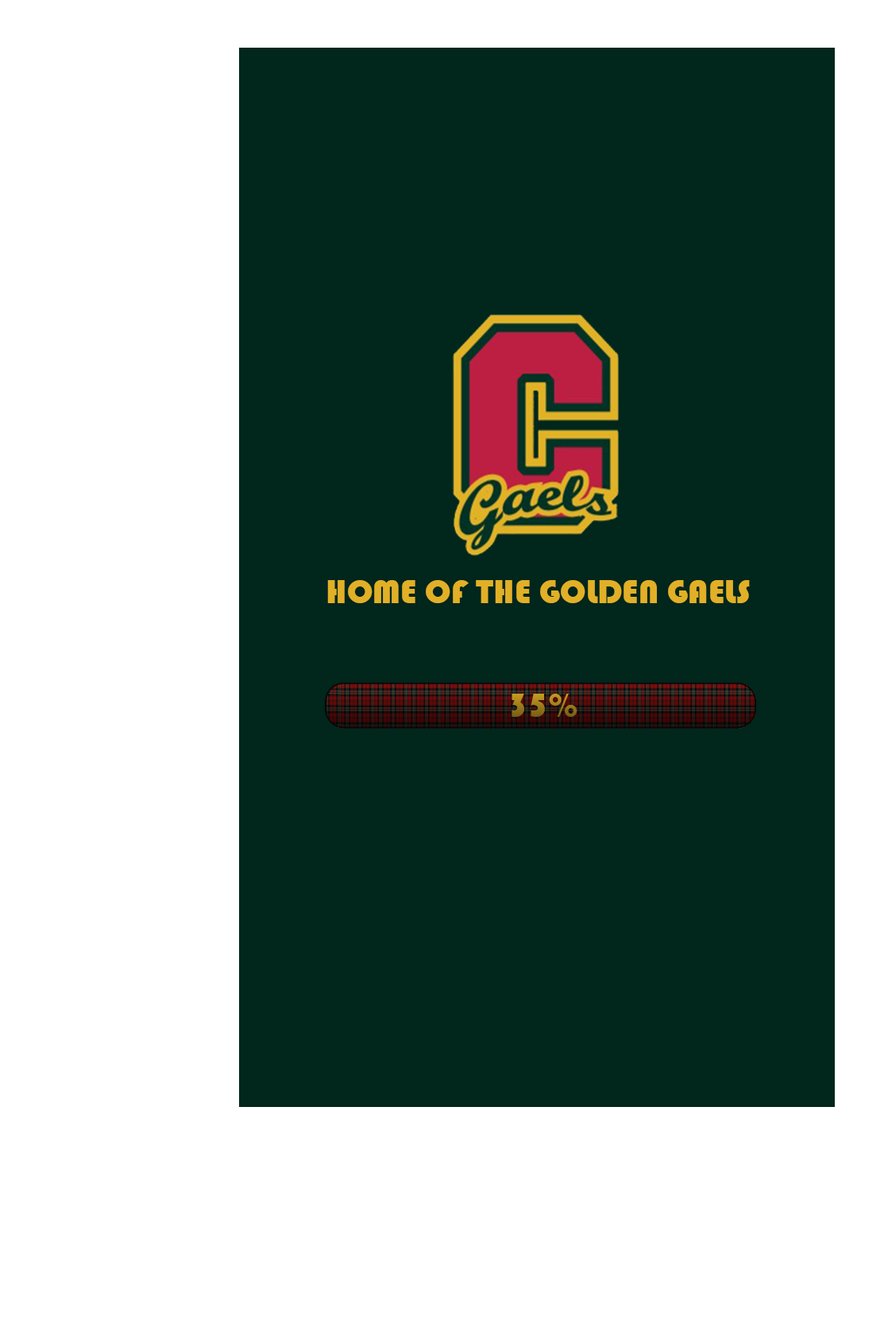
<style>
.page{position:relative;width:888px;height:1343px;background:#01261c}
.page>*{position:absolute;margin:0}
.t1{font:34.1px "Bauhaus93";color:#e1b027}
.t2{font:34.1px "Bauhaus93"}
</style>
<div class="page">
<p class="t1" style="left:327px;top:580px;width:423px;height:23px">HOME OF THE GOLDEN GAELS</p>
<p class="t2" style="left:512px;top:694px;width:66px;height:23px">35%</p>
</div>
